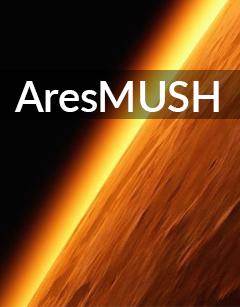
<style>
.page{position:relative;width:240px;height:307px}
.page>*{position:absolute;margin:0}
.t1{font:41.7px "Lato-Semibold";color:#ffffff}
</style>
<div class="page">
<p class="t1" style="left:14px;top:81px;width:205px;height:31px">AresMUSH</p>
</div>
